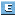
<style>
.page{position:relative;width:16px;height:16px;background:#ffffff}
.page>*{position:absolute;margin:0}
.t1{font:9.5px "NewAthleticM54";color:#ffffff;font-weight:bold;scale:1.48 1}
</style>
<div class="page">
<p class="t1" style="left:5px;top:4px;width:7px;height:7px">E</p>
</div>
